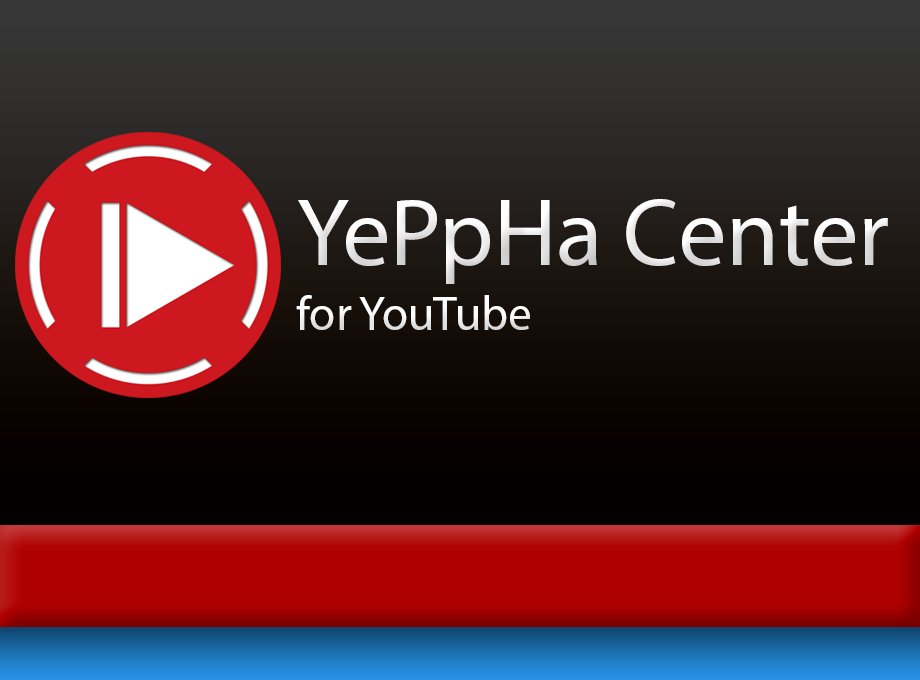
<style>
.page{position:relative;width:920px;height:680px}
.page>*{position:absolute;margin:0}
.t1{font:96px "MyriadPro-Regular"}
.t2{font:48px "MyriadPro-Regular";color:#ffffff}
</style>
<div class="page">
<p class="t1" style="left:298px;top:199px;width:590px;height:85px">YePpHa Center</p>
<p class="t2" style="left:296px;top:295px;width:234px;height:35px">for YouTube</p>
</div>
